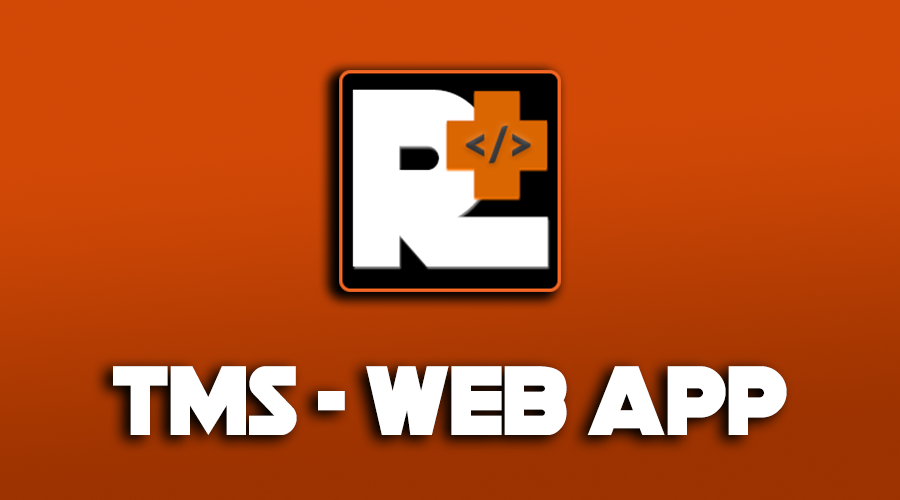
<style>
.page{position:relative;width:900px;height:500px}
.page>*{position:absolute;margin:0}
.t1{font:97px "DeathStar";letter-spacing:0.01em;color:#ffffff}
</style>
<div class="page">
<p class="t1" style="left:113px;top:366px;width:674px;height:69px">tms - web app</p>
</div>
